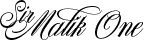
<style>
.page{position:relative;width:144px;height:40px;background:#ffffff}
.page>*{position:absolute;margin:0}
.t1{font:30px "Nautica-Bold";color:#000000}
.t2{font:36px "Nautica-Bold";color:#000000}
</style>
<div class="page">
<p class="t1" style="left:0px;top:0px;width:35px;height:28px">Sir</p>
<p class="t2" style="left:5px;top:6px;width:139px;height:34px">Malik One</p>
</div>
